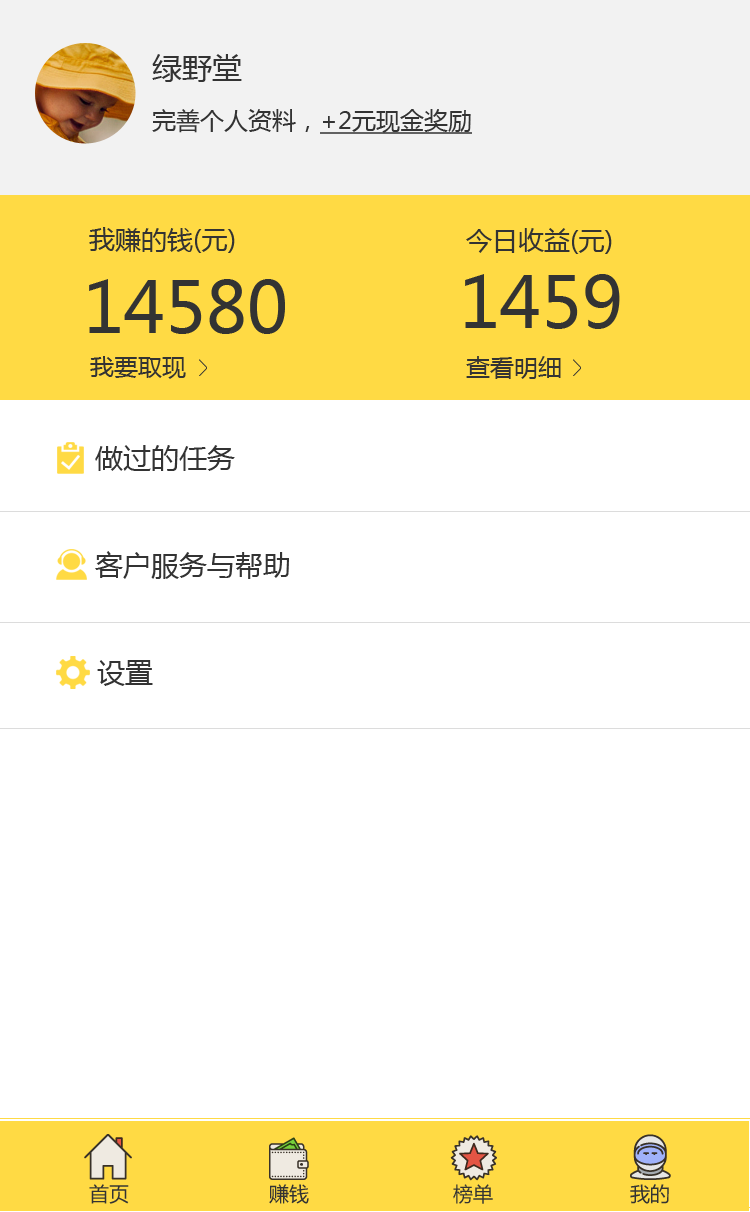
<style>
.page{position:relative;width:750px;height:1212px;background:#ffffff}
.page>*{position:absolute;margin:0}
.t1{font:30px "MicrosoftYaHei";color:#333333}
.t2{font:24px "MicrosoftYaHei";color:#333333}
.t3{font:24px "MicrosoftYaHei";color:#333333;text-decoration:underline}
.t4{font:26px "MicrosoftYaHei";color:#333333}
.t5{font:70px "MicrosoftYaHei";color:#333333}
.t6{font:28px "MicrosoftYaHei";color:#333333}
.t7{font:20px "MicrosoftYaHei";color:#333333}
</style>
<div class="page">
<p class="t1" style="left:152px;top:54px;width:90px;height:28px">绿野堂</p>
<p class="t2" style="left:152px;top:109px;width:320px;height:25px">完善个人资料，<span class="t3">+2元现金奖励</span></p>
<p class="t4" style="left:89px;top:227px;width:146px;height:26px">我赚的钱(元)</p>
<p class="t4" style="left:466px;top:228px;width:146px;height:26px">今日收益(元)</p>
<p class="t5" style="left:89px;top:279px;width:196px;height:55px">14580</p>
<p class="t5" style="left:465px;top:274px;width:155px;height:55px">1459</p>
<p class="t2" style="left:90px;top:356px;width:96px;height:23px">我要取现</p>
<p class="t2" style="left:466px;top:356px;width:95px;height:23px">查看明细</p>
<p class="t6" style="left:95px;top:445px;width:140px;height:26px">做过的任务</p>
<p class="t6" style="left:95px;top:551px;width:194px;height:28px">客户服务与帮助</p>
<p class="t6" style="left:97px;top:660px;width:56px;height:26px">设置</p>
<p class="t7" style="left:89px;top:1184px;width:40px;height:20px">首页</p>
<p class="t7" style="left:269px;top:1184px;width:40px;height:20px">赚钱</p>
<p class="t7" style="left:453px;top:1184px;width:40px;height:20px">榜单</p>
<p class="t7" style="left:630px;top:1184px;width:39px;height:20px">我的</p>
</div>
